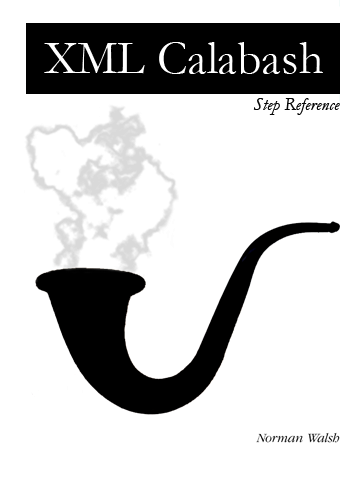
<style>
.page{position:relative;width:364px;height:480px;background:#ffffff}
.page>*{position:absolute;margin:0}
.t1{font:48px "Garamond";color:#ffffff}
.t2{font:18px "Garamond-Italic";color:#060606}
</style>
<div class="page">
<p class="t1" style="left:44px;top:42px;width:279px;height:32px">XML Calabash</p>
<p class="t2" style="left:253px;top:98px;width:87px;height:17px">Step Reference</p>
</div>
